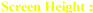
<style>
.page{position:relative;width:93px;height:13px;background:#ffffff}
.page>*{position:absolute;margin:0}
.t1{font:14px "TimesNewRomanPS-BoldMT";color:#eefd00}
</style>
<div class="page">
<p class="t1" style="left:1px;top:1px;width:91px;height:13px">Screen Height :</p>
<p class="t1" style="left:90px;top:4px;width:3px;height:8px">:</p>
</div>
